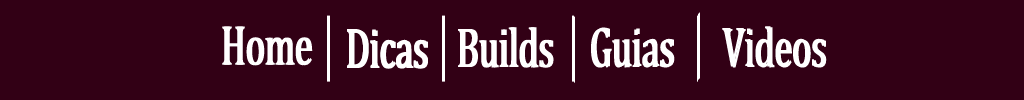
<style>
.page{position:relative;width:1024px;height:100px;background:#320015}
.page>*{position:absolute;margin:0}
.t1{font:56.9px "Cambria";color:#ffffff;scale:0.63 1}
</style>
<div class="page">
<p class="t1" style="left:222px;top:26px;width:89px;height:40px">Home</p>
<p class="t1" style="left:224px;top:26px;width:89px;height:40px">Home</p>
<p class="t1" style="left:347px;top:29px;width:79px;height:39px">Dicas</p>
<p class="t1" style="left:347px;top:30px;width:79px;height:39px">Dicas</p>
<p class="t1" style="left:349px;top:30px;width:79px;height:39px">Dicas</p>
<p class="t1" style="left:458px;top:27px;width:94px;height:41px">Builds</p>
<p class="t1" style="left:460px;top:27px;width:94px;height:41px">Builds</p>
<p class="t1" style="left:591px;top:28px;width:82px;height:40px">Guias</p>
<p class="t1" style="left:593px;top:27px;width:82px;height:40px">Guias</p>
<p class="t1" style="left:722px;top:26px;width:103px;height:41px">Videos</p>
<p class="t1" style="left:724px;top:27px;width:103px;height:41px">Videos</p>
</div>
